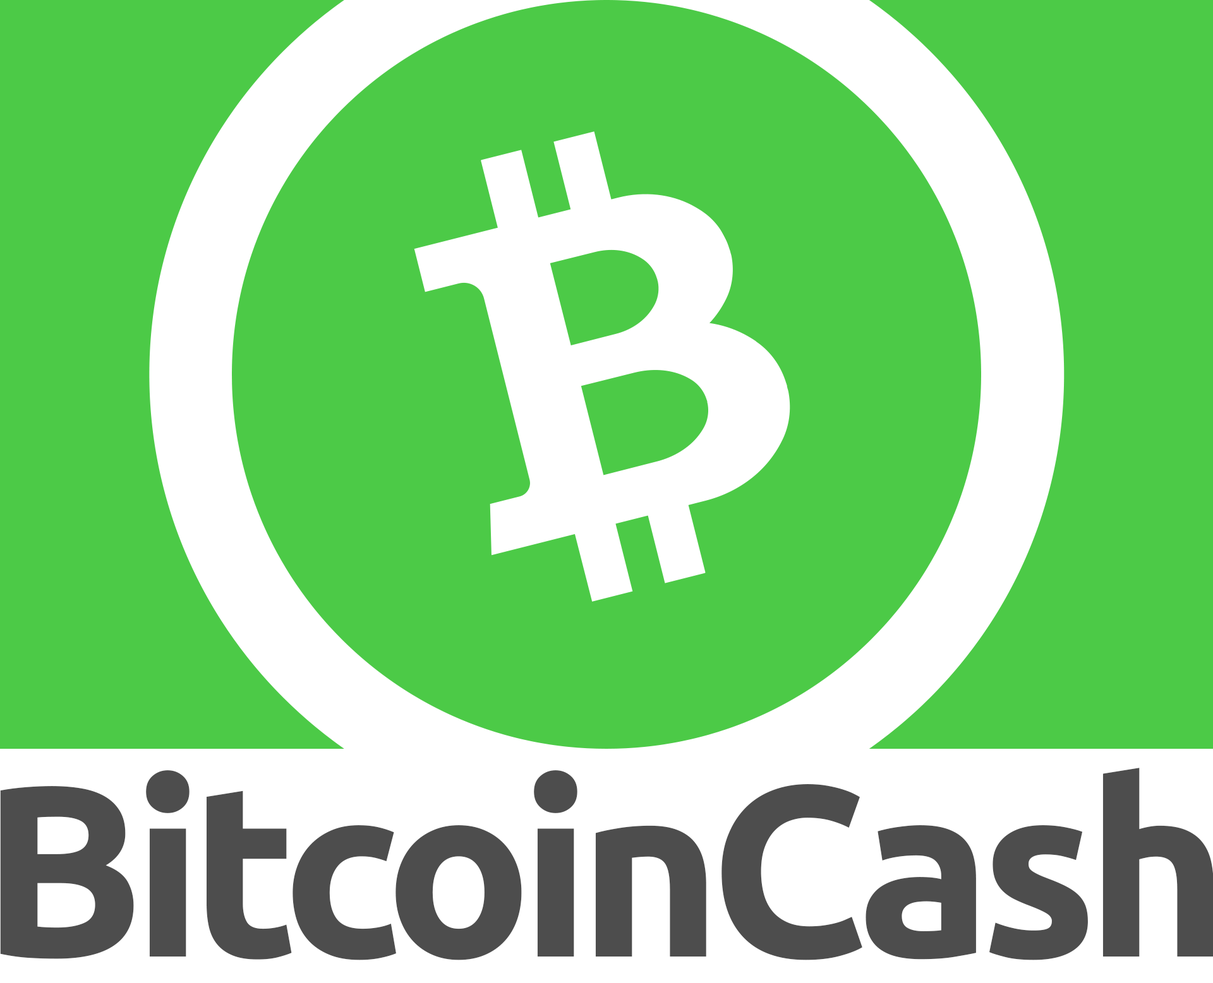
<style>
.page{position:relative;width:1213px;height:983px;background:#4cca47}
.page>*{position:absolute;margin:0}
.t1{font:243.1px "Ubuntu-Bold";letter-spacing:-0.05em;color:#4d4d4d}
</style>
<div class="page">
<p class="t1" style="left:0px;top:768px;width:1213px;height:193px">BitcoinCash</p>
</div>
